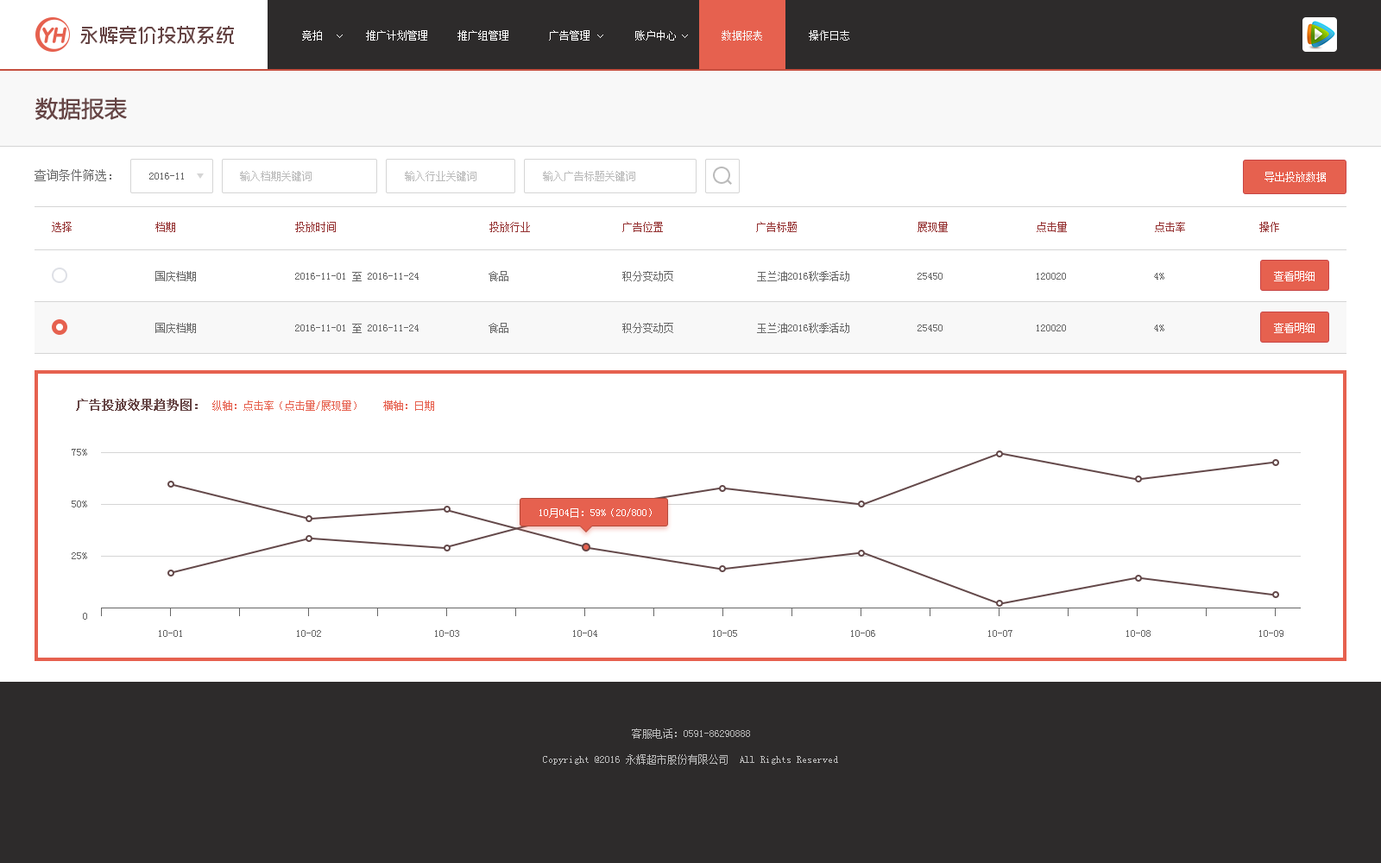
<style>
.page{position:relative;width:1381px;height:863px;background:#ffffff}
.page>*{position:absolute;margin:0}
.t1{font:10.4px "SimSun";color:#ffffff}
.t2{font:10.4px "SimSun";color:#f8f8f8}
.t3{font:22.4px "MicrosoftYaHei";color:#664545;font-weight:bold}
.t4{font:12.1px "SimSun";color:#666666}
.t5{font:10.4px "SimSun";color:#666666}
.t6{font:10.4px "SimSun";color:#bababa}
.t7{font:10.4px "SimSun";color:#953232}
.t8{font:12.1px "SimSun";color:#664545;font-weight:bold}
.t9{font:10.4px "SimSun";color:#e6614f}
</style>
<div class="page">
<p class="t1" style="left:302px;top:30px;width:20px;height:11px">竞拍</p>
<p class="t1" style="left:366px;top:30px;width:61px;height:11px">推广计划管理</p>
<p class="t1" style="left:458px;top:30px;width:50px;height:11px">推广组管理</p>
<p class="t1" style="left:549px;top:30px;width:41px;height:11px">广告管理</p>
<p class="t1" style="left:635px;top:30px;width:41px;height:11px">账户中心</p>
<p class="t2" style="left:722px;top:30px;width:40px;height:11px">数据报表</p>
<p class="t2" style="left:809px;top:30px;width:40px;height:11px">操作日志</p>
<p class="t3" style="left:35px;top:98px;width:92px;height:22px">数据报表</p>
<p class="t4" style="left:35px;top:169px;width:76px;height:12px">查询条件筛选：</p>
<p class="t5" style="left:149px;top:173px;width:35px;height:7px">2016-11</p>
<p class="t6" style="left:240px;top:171px;width:72px;height:10px">输入档期关键词</p>
<p class="t6" style="left:405px;top:171px;width:72px;height:10px">输入行业关键词</p>
<p class="t6" style="left:543px;top:171px;width:92px;height:10px">输入广告标题关键词</p>
<p class="t1" style="left:1265px;top:172px;width:61px;height:10px">导出投放数据</p>
<p class="t7" style="left:52px;top:222px;width:20px;height:10px">选择</p>
<p class="t7" style="left:155px;top:222px;width:20px;height:10px">档期</p>
<p class="t7" style="left:295px;top:222px;width:41px;height:10px">投放时间</p>
<p class="t7" style="left:489px;top:222px;width:41px;height:10px">投放行业</p>
<p class="t7" style="left:622px;top:222px;width:41px;height:10px">广告位置</p>
<p class="t7" style="left:756px;top:222px;width:41px;height:10px">广告标题</p>
<p class="t7" style="left:918px;top:222px;width:30px;height:10px">展现量</p>
<p class="t7" style="left:1037px;top:222px;width:30px;height:10px">点击量</p>
<p class="t7" style="left:1155px;top:222px;width:30px;height:10px">点击率</p>
<p class="t7" style="left:1260px;top:222px;width:19px;height:10px">操作</p>
<p class="t5" style="left:155px;top:271px;width:41px;height:10px">国庆档期</p>
<p class="t5" style="left:295px;top:272px;width:124px;height:9px">2016-11-01 至 2016-11-24</p>
<p class="t5" style="left:489px;top:271px;width:19px;height:10px">食品</p>
<p class="t5" style="left:622px;top:271px;width:51px;height:10px">积分变动页</p>
<p class="t5" style="left:757px;top:271px;width:92px;height:10px">玉兰油2016秋季活动</p>
<p class="t5" style="left:918px;top:273px;width:25px;height:7px">25450</p>
<p class="t5" style="left:1037px;top:273px;width:29px;height:7px">120020</p>
<p class="t5" style="left:1154px;top:273px;width:11px;height:7px">4%</p>
<p class="t1" style="left:1274px;top:271px;width:41px;height:10px">查看明细</p>
<p class="t5" style="left:155px;top:323px;width:41px;height:10px">国庆档期</p>
<p class="t5" style="left:295px;top:324px;width:124px;height:9px">2016-11-01 至 2016-11-24</p>
<p class="t5" style="left:489px;top:323px;width:19px;height:10px">食品</p>
<p class="t5" style="left:622px;top:323px;width:51px;height:10px">积分变动页</p>
<p class="t5" style="left:757px;top:323px;width:92px;height:10px">玉兰油2016秋季活动</p>
<p class="t5" style="left:918px;top:325px;width:25px;height:7px">25450</p>
<p class="t5" style="left:1037px;top:325px;width:29px;height:7px">120020</p>
<p class="t5" style="left:1154px;top:325px;width:11px;height:7px">4%</p>
<p class="t1" style="left:1274px;top:323px;width:41px;height:10px">查看明细</p>
<p class="t8" style="left:76px;top:399px;width:122px;height:12px">广告投放效果趋势图：</p>
<p class="t9" style="left:212px;top:401px;width:222px;height:10px">纵轴：点击率（点击量/展现量）    横轴：日期</p>
<p class="t5" style="left:72px;top:449px;width:15px;height:7px">75%</p>
<p class="t5" style="left:72px;top:501px;width:15px;height:7px">50%</p>
<p class="t1" style="left:540px;top:508px;width:112px;height:10px">10月04日：59%（20/800）</p>
<p class="t5" style="left:72px;top:553px;width:15px;height:6px">25%</p>
<p class="t5" style="left:83px;top:613px;width:4px;height:7px">0</p>
<p class="t5" style="left:159px;top:630px;width:23px;height:7px">10-01</p>
<p class="t5" style="left:297px;top:630px;width:24px;height:7px">10-02</p>
<p class="t5" style="left:435px;top:630px;width:24px;height:7px">10-03</p>
<p class="t5" style="left:573px;top:630px;width:24px;height:7px">10-04</p>
<p class="t5" style="left:713px;top:630px;width:24px;height:7px">10-05</p>
<p class="t5" style="left:851px;top:630px;width:24px;height:7px">10-06</p>
<p class="t5" style="left:988px;top:630px;width:25px;height:7px">10-07</p>
<p class="t5" style="left:1127px;top:630px;width:24px;height:7px">10-08</p>
<p class="t5" style="left:1260px;top:630px;width:24px;height:7px">10-09</p>
<p class="t6" style="left:632px;top:729px;width:118px;height:10px">客服电话：0591-86290888</p>
<p class="t6" style="left:543px;top:755px;width:295px;height:10px">Copyright @2016 永辉超市股份有限公司  All Rights Reserved</p>
</div>
